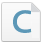
<style>
.page{position:relative;width:43px;height:43px}
.page>*{position:absolute;margin:0}
.t1{font:32px "Corbel";color:#5d98b7;font-weight:bold;scale:1.1 1}
</style>
<div class="page">
<p class="t1" style="left:13px;top:10px;width:18px;height:23px">C</p>
</div>
